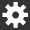
<style>
.page{position:relative;width:30px;height:30px;background:#333333}
.page>*{position:absolute;margin:0}
.t1{font:47px "AppleSymbols";color:#ffffff}
</style>
<div class="page">
<p class="t1" style="left:2px;top:2px;width:26px;height:26px">⚙</p>
</div>
